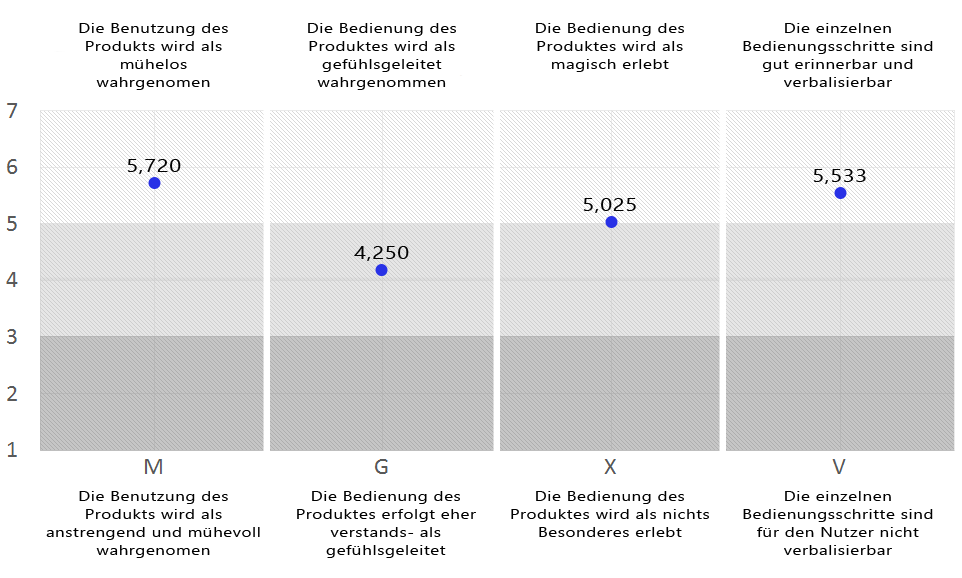
<style>
.page{position:relative;width:962px;height:578px;background:#ffffff}
.page>*{position:absolute;margin:0}
.t1{font:14px/18px "SegoeUI";letter-spacing:0.04em;color:#000000;scale:1.2 1}
.t2{font:18px "SegoeUI";letter-spacing:0.04em;color:#020202;scale:1.2 1}
</style>
<div class="page">
<p class="t1" style="left:79px;top:23px;width:149px;height:67px;text-align:center">Die Benutzung des <br>Produkts wird als <br>mühelos <br>wahrgenomen</p>
<p class="t1" style="left:308px;top:23px;width:148px;height:67px;text-align:center">Die Bedienung des <br>Produktes wird als <br>gefühlsgeleitet <br>wahrgenommen</p>
<p class="t1" style="left:536px;top:23px;width:148px;height:49px;text-align:center">Die Bedienung des <br>Produktes wird als <br>magisch erlebt</p>
<p class="t1" style="left:743px;top:23px;width:190px;height:64px;text-align:center">Die einzelnen <br>Bedienungsschritte sind gut erinnerbar und <br>verbalisierbar</p>
<p class="t2" style="left:127px;top:159px;width:54px;height:15px">5,720</p>
<p class="t2" style="left:813px;top:169px;width:53px;height:15px">5,533</p>
<p class="t2" style="left:583px;top:198px;width:53px;height:15px">5,025</p>
<p class="t2" style="left:354px;top:246px;width:55px;height:15px">4,250</p>
<p class="t1" style="left:46px;top:491px;width:214px;height:67px;text-align:center">Die Benutzung des <br>Produkts wird als <br>anstrengend und mühevoll <br>wahrgenomen</p>
<p class="t1" style="left:297px;top:491px;width:179px;height:67px;text-align:center">Die Bedienung des <br>Produktes erfolgt eher <br>verstands- als <br>gefühlsgeleitet</p>
<p class="t1" style="left:511px;top:491px;width:198px;height:46px;text-align:center">Die Bedienung des <br>Produktes wird als nichts Besonderes erlebt</p>
<p class="t1" style="left:743px;top:491px;width:190px;height:64px;text-align:center">Die einzelnen <br>Bedienungsschritte sind <br>für den Nutzer nicht <br>verbalisierbar</p>
</div>
